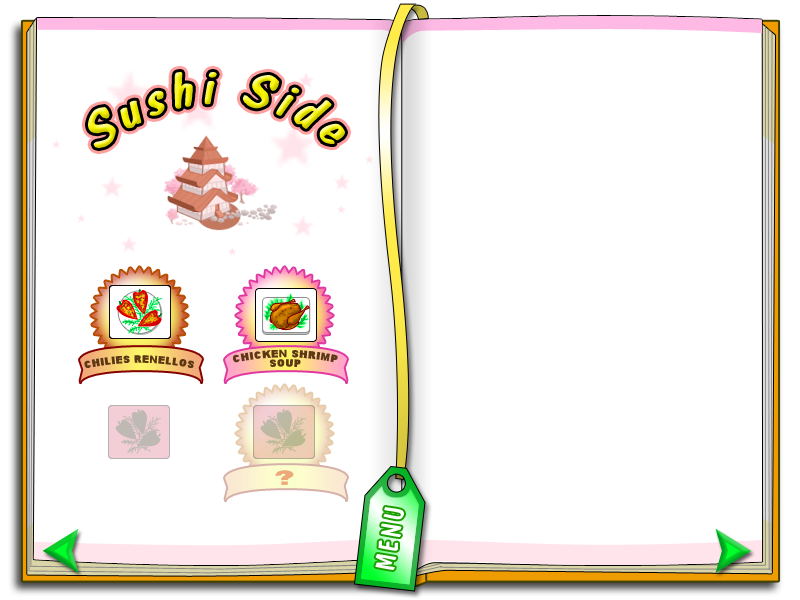
<style>
.page{position:relative;width:800px;height:600px;background:#ffffff}
.page>*{position:absolute;margin:0}
.t1{font:50.8px "DomCasualBT-Regular";letter-spacing:0.095em;font-style:italic}
.t2{font:9.4px/9.4px "Arial-Black";letter-spacing:0.045em;color:#5b3714;text-transform:uppercase}
.t3{font:9.4px "Arial-Black";letter-spacing:0.045em;color:#5b3714;text-transform:uppercase}
.t4{font:18.5px "Arial-Black";letter-spacing:0.045em;color:#eda977;text-transform:uppercase}
.t5{font:28.1px "DomCasualBT-Regular";letter-spacing:0.09em;color:#ffffff;font-variant:small-caps}
</style>
<div class="page">
<p class="t1" style="left:88px;top:72px;width:257px;height:76px;rotate:-1deg">Sushi Side</p>
<p class="t2" style="left:233px;top:349px;width:105px;height:18px;text-align:center">chicken shrimp<br>soup</p>
<p class="t3" style="left:84px;top:355px;width:111px;height:13px">chilies renellos</p>
<p class="t4" style="left:275px;top:470px;width:19px;height:15px">?</p>
<p class="t5" style="left:375px;top:507px;width:29px;height:63px;rotate:-80deg">MENU</p>
</div>
